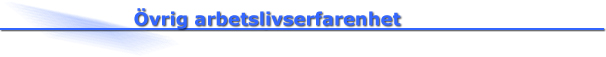
<style>
.page{position:relative;width:606px;height:57px;background:#ffffff}
.page>*{position:absolute;margin:0}
.t1{font:18px "Verdana-Bold";color:#3366ff}
</style>
<div class="page">
<p class="t1" style="left:134px;top:8px;width:267px;height:21px">Övrig arbetslivserfarenhet</p>
</div>
